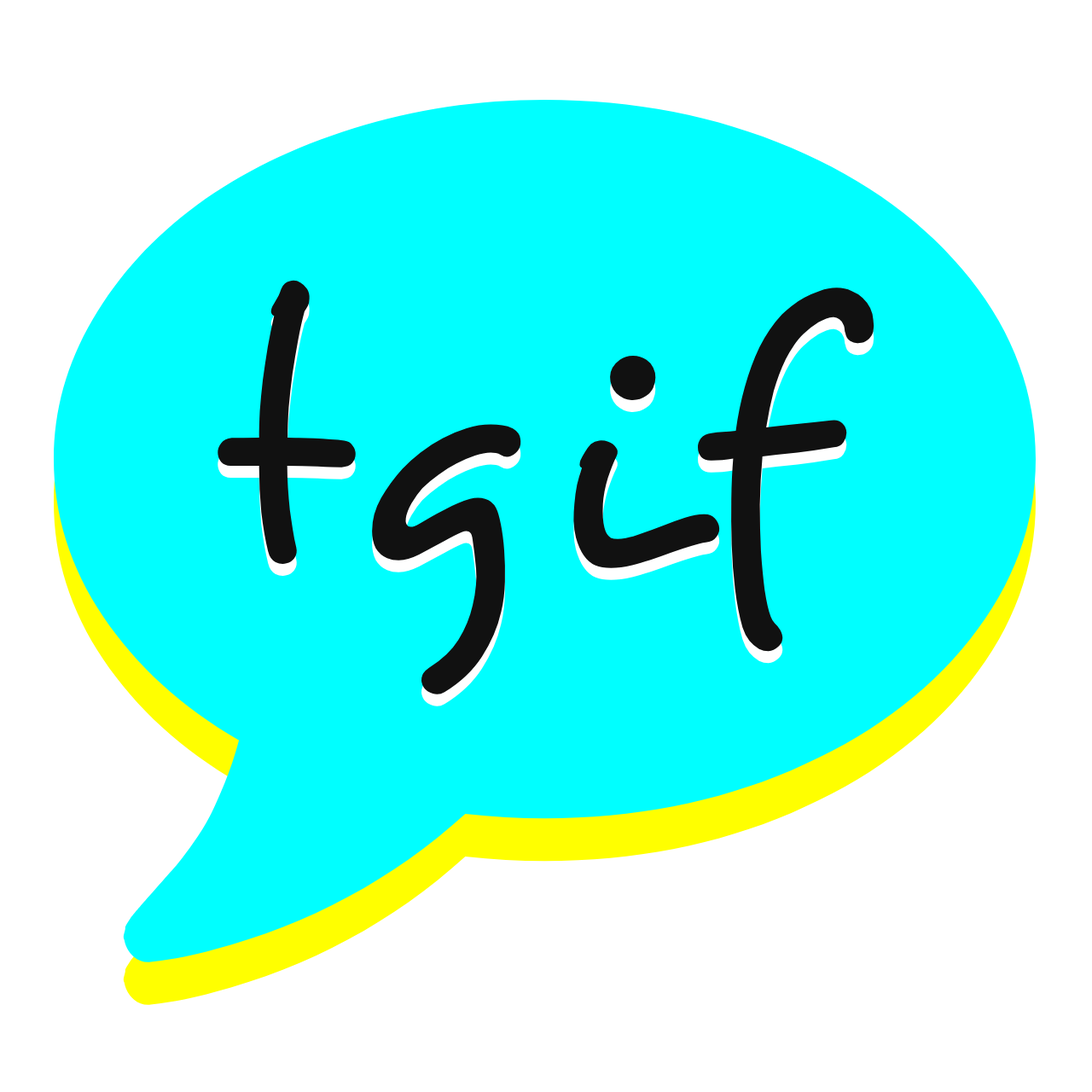
<style>
.page{position:relative;width:1092px;height:1092px;background:#ffffff}
.page>*{position:absolute;margin:0}
.t1{font:375.4px "Desyrel";color:#111111}
</style>
<div class="page">
<p class="t1" style="left:218px;top:279px;width:656px;height:417px">tgif</p>
<p class="t1" style="left:218px;top:291px;width:656px;height:417px">tgif</p>
</div>
